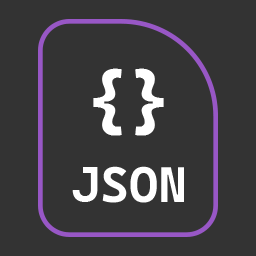
<style>
.page{position:relative;width:256px;height:256px;background:#333333}
.page>*{position:absolute;margin:0}
.t1{font:75px "CascadiaMonoRoman-Bold";color:#ffffff}
.t2{font:50px "CascadiaMonoRoman-Bold";color:#ffffff}
</style>
<div class="page">
<p class="t1" style="left:93px;top:68px;width:71px;height:68px">{}</p>
<p class="t2" style="left:72px;top:166px;width:112px;height:37px">JSON</p>
</div>
